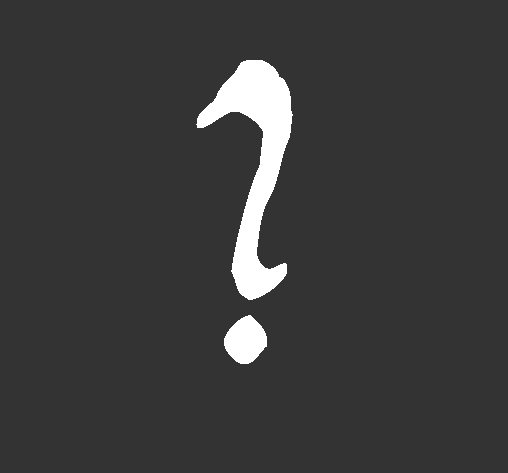
<style>
.page{position:relative;width:508px;height:473px;background:#333333}
.page>*{position:absolute;margin:0}
.t1{font:328px "HamletOrNot";color:#ffffff}
</style>
<div class="page">
<p class="t1" style="left:196px;top:60px;width:97px;height:304px">?</p>
</div>
